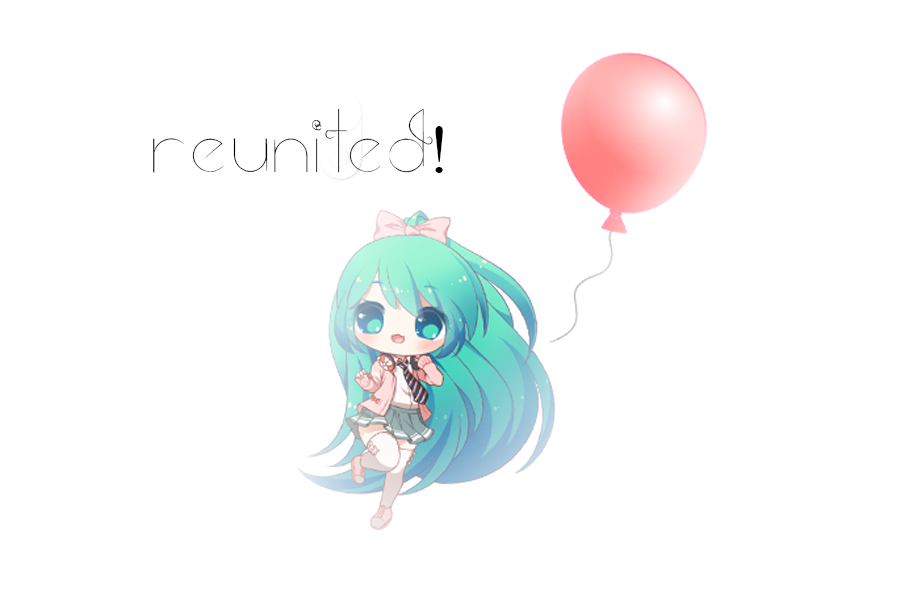
<style>
.page{position:relative;width:900px;height:600px;background:#ffffff}
.page>*{position:absolute;margin:0}
.t1{font:66.7px "cloud";color:#000000}
.t2{font:66.7px "TimesNewRomanPSMT";color:#000000}
</style>
<div class="page">
<p class="t1" style="left:153px;top:108px;width:290px;height:65px">Reunited<span class="t2">!</span></p>
</div>
